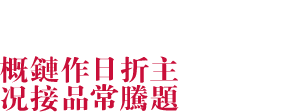
<style>
.page{position:relative;width:300px;height:112px;background:#ffffff}
.page>*{position:absolute;margin:0}
.t1{font:30px "FZDBSFW--GB1-0";letter-spacing:0.01em;color:#c90f39;scale:0.95 1}
</style>
<div class="page">
<p class="t1" style="left:0px;top:56px;width:29px;height:55px">概况</p>
<p class="t1" style="left:30px;top:56px;width:29px;height:56px">链接</p>
<p class="t1" style="left:61px;top:57px;width:28px;height:54px">作品</p>
<p class="t1" style="left:90px;top:57px;width:29px;height:54px">日常</p>
<p class="t1" style="left:120px;top:56px;width:29px;height:55px">折腾</p>
<p class="t1" style="left:150px;top:56px;width:29px;height:55px">主题</p>
</div>
